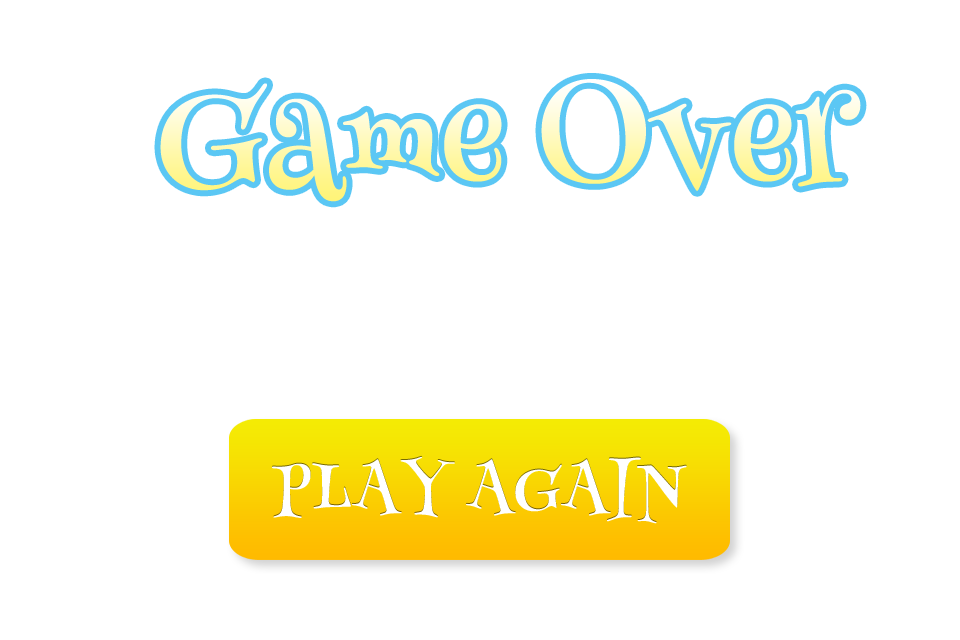
<style>
.page{position:relative;width:960px;height:640px;background:#ffffff}
.page>*{position:absolute;margin:0}
.t1{font:141.6px "HennyPenny-Regular"}
.t2{font:62px "HennyPenny-Regular";color:#ffffff}
</style>
<div class="page">
<p class="t1" style="left:160px;top:79px;width:701px;height:123px">Game Over</p>
<p class="t2" style="left:272px;top:456px;width:415px;height:68px">PLAY AGAIN</p>
</div>
